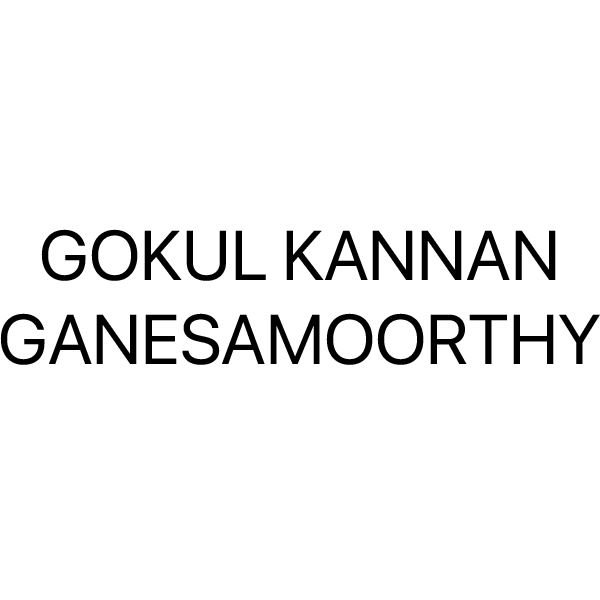
<style>
.page{position:relative;width:600px;height:600px;background:#ffffff}
.page>*{position:absolute;margin:0}
.t1{font:70px "SFPro-Regular";color:#000000}
</style>
<div class="page">
<p class="t1" style="left:0px;top:229px;width:600px;height:136px;text-align:center">GOKUL KANNAN<br>GANESAMOORTHY</p>
</div>
